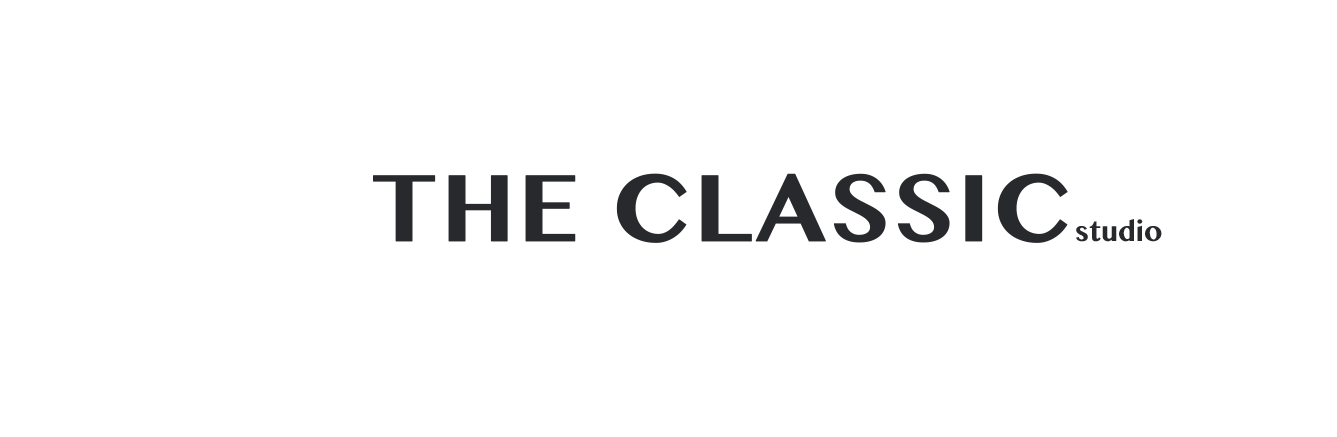
<style>
.page{position:relative;width:1337px;height:437px;background:#ffffff}
.page>*{position:absolute;margin:0}
.t1{font:100.1px "TeluguMN-Bold";color:#28292d;font-weight:bold}
.t2{font:30px "TeluguMN-Bold";color:#28292d}
</style>
<div class="page">
<p class="t1" style="left:373px;top:173px;width:695px;height:70px">THE CLASSIC</p>
<p class="t2" style="left:1076px;top:219px;width:86px;height:23px">studio</p>
</div>
